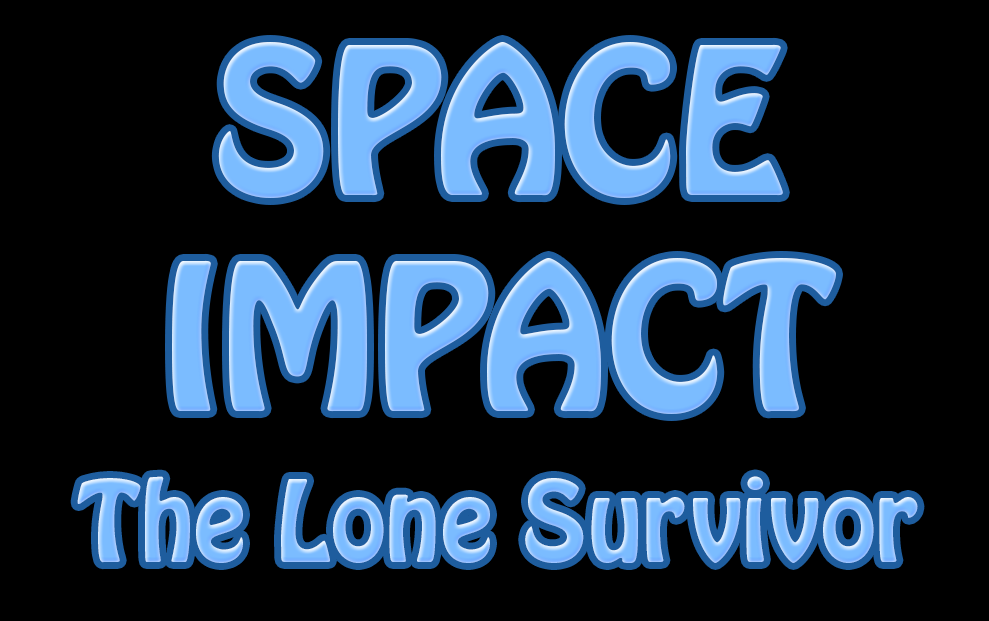
<style>
.page{position:relative;width:989px;height:621px;background:#000000}
.page>*{position:absolute;margin:0}
.t1{font:180px "HoboStd";color:#7bbcff}
.t2{font:100px "HoboStd";color:#7bbcff}
</style>
<div class="page">
<p class="t1" style="left:172px;top:42px;width:664px;height:372px">SPACE  <br> IMPACT</p>
<p class="t2" style="left:77px;top:476px;width:841px;height:87px">The Lone Survivor</p>
</div>
